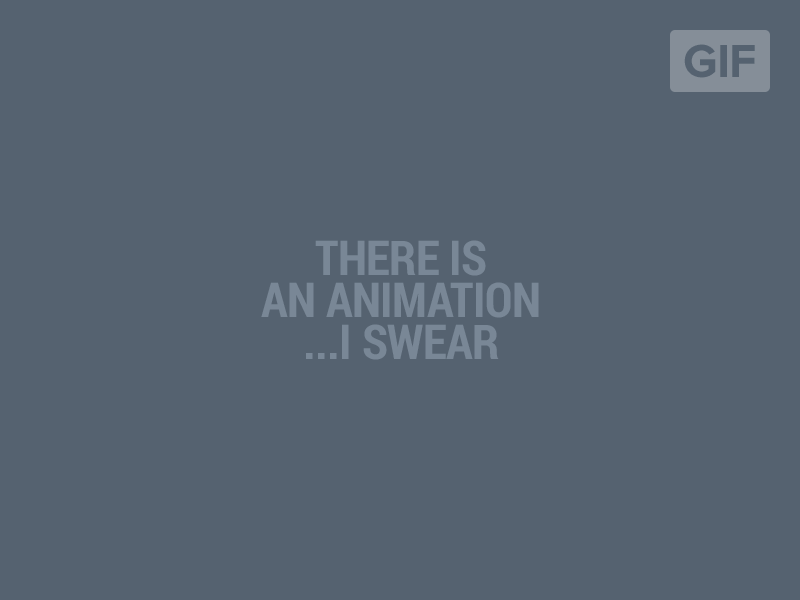
<style>
.page{position:relative;width:800px;height:600px;background:#556270}
.page>*{position:absolute;margin:0}
.t1{font:48px "ProximaNova-Bold";letter-spacing:-0.025em;color:#556270}
.t2{font:48px/42px "RobotoCondensed-Bold";letter-spacing:-0.01em;color:#798796}
</style>
<div class="page">
<p class="t1" style="left:684px;top:44px;width:71px;height:34px">GIF</p>
<p class="t2" style="left:261px;top:240px;width:278px;height:120px;text-align:center">THERE IS<br>AN ANIMATION<br>...I SWEAR</p>
</div>
